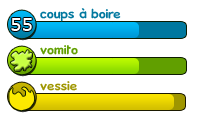
<style>
.page{position:relative;width:199px;height:121px;background:#ffffff}
.page>*{position:absolute;margin:0}
.t1{font:12px "Kronika";color:#00789f}
.t2{font:18px "Verdana";color:#ffffff}
.t3{font:12px "Kronika";color:#619f00}
.t4{font:12px "Kronika";color:#9f9600}
</style>
<div class="page">
<p class="t1" style="left:40px;top:8px;width:81px;height:14px">coups à boire</p>
<p class="t2" style="left:11px;top:18px;width:21px;height:13px">55</p>
<p class="t3" style="left:40px;top:45px;width:38px;height:10px">vomito</p>
<p class="t4" style="left:40px;top:81px;width:37px;height:10px">vessie</p>
</div>
